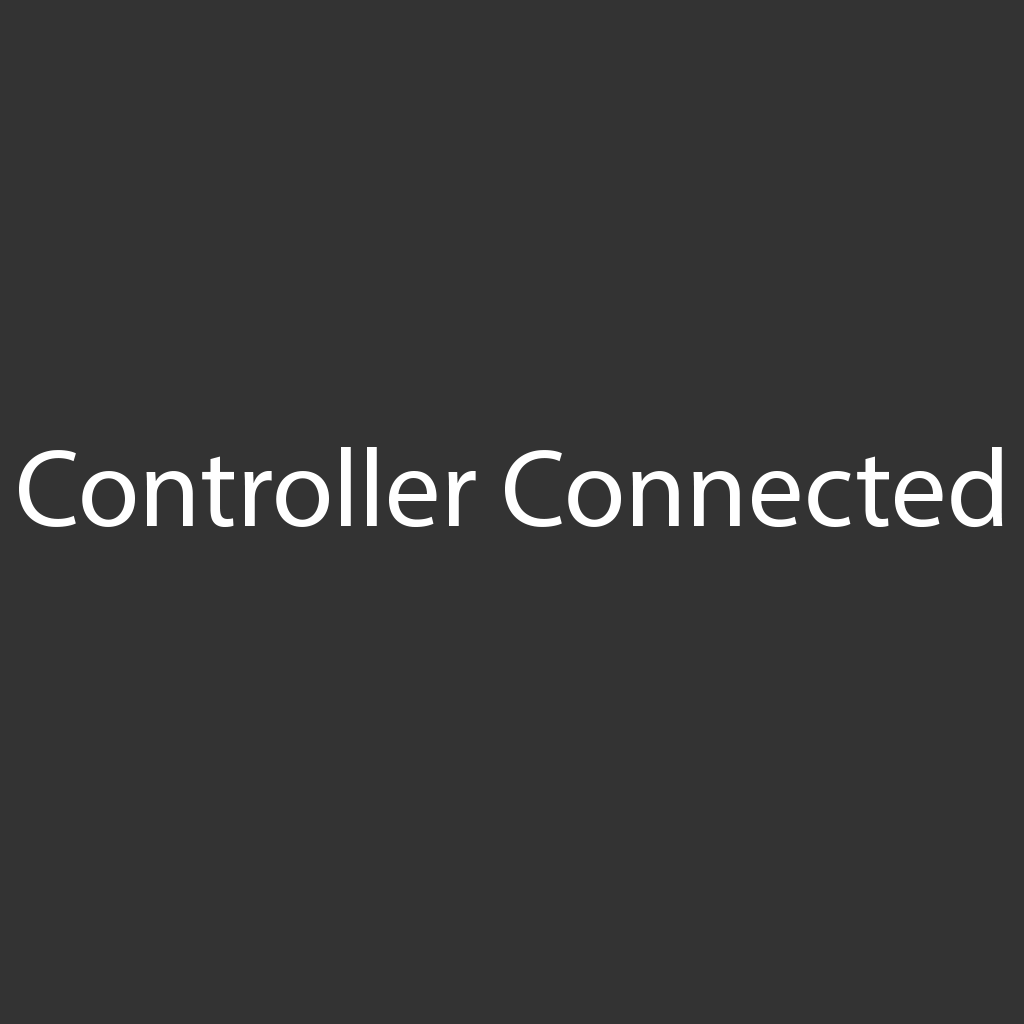
<style>
.page{position:relative;width:1024px;height:1024px;background:#333333}
.page>*{position:absolute;margin:0}
.t1{font:111px "MyriadPro-Regular";color:#ffffff}
</style>
<div class="page">
<p class="t1" style="left:19px;top:447px;width:984px;height:81px">Controller Connected</p>
</div>
